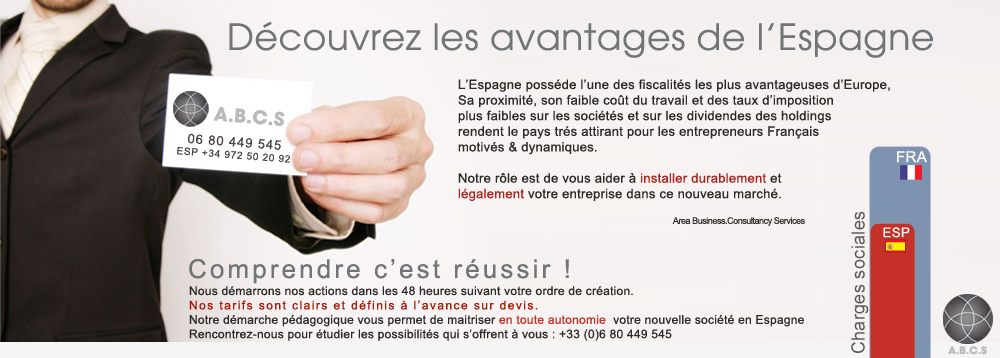
<style>
.page{position:relative;width:1000px;height:358px}
.page>*{position:absolute;margin:0}
.t1{font:36px "AvantGarde-Book";letter-spacing:0.02em;color:#717578}
.t2{font:13px "ArialMT";letter-spacing:0.02em;color:#2b2b26}
.t3{font:13px "ArialMT";letter-spacing:0.02em;color:#ae211b}
.t4{font:13px "ArialMT";letter-spacing:0.02em;color:#b12019}
.t5{font:18.6px "AvantGardeLT-Bold";letter-spacing:0.01em;color:#bababa}
.t6{font:10px "ArialMT";letter-spacing:0.07em;color:#494343}
.t7{font:13px "ArialMT";letter-spacing:0.07em;color:#494343}
.t8{font:15.1px "ArialMT";letter-spacing:0.02em;color:#fefefc}
.t9{font:9px "ArialMT";letter-spacing:-0.05em;color:#362e2b}
.t10{font:10px "ArialMT";letter-spacing:0.025em;color:#362e2b}
.t11{font:18px "ArialMT";letter-spacing:0.02em;color:#5a5957}
.t12{font:13.4px "ArialMT";letter-spacing:0.02em;color:#fcf9f4}
.t13{font:26px "ArialMT";letter-spacing:0.12em;color:#717578}
.t14{font:12px "ArialMT";letter-spacing:0.02em;color:#2b2b26}
.t15{font:12px "ArialMT";letter-spacing:0.12em;color:#a41a07}
.t16{font:12px "ArialMT";letter-spacing:0.02em;color:#c53029}
.t17{font:10.2px "AvantGardeLT-Bold";letter-spacing:0.01em;color:#bababa}
</style>
<div class="page">
<p class="t1" style="left:229px;top:21px;width:704px;height:37px">Découvrez les avantages de l’Espagne</p>
<p class="t2" style="left:458px;top:79px;width:432px;height:122px">L’Espagne posséde l’une des fiscalités les plus avantageuses d’Europe,<br>Sa proximité, son faible coût du travail et des taux d’imposition <br>plus faibles sur les sociétés et sur les dividendes des holdings  <br>rendent le pays trés attirant pour les entrepreneurs Français<br>motivés &amp; dynamiques.<br><br>Notre rôle est de vous aider à <span class="t3">installer durablement </span>et<br><span class="t4">légalement </span>votre entreprise dans ce nouveau marché.</p>
<p class="t5" style="left:213px;top:107px;width:72px;height:19px;rotate:5deg">A.B.C.S</p>
<p class="t6" style="left:177px;top:133px;width:113px;height:30px;text-align:center;rotate:4deg"><span class="t7">06 80 449 545<br></span>ESP +34 972 50 20 92</p>
<p class="t8" style="left:897px;top:151px;width:30px;height:12px">FRA</p>
<p class="t9" style="left:672px;top:217px;width:133px;height:9px"><span class="t10"><br></span>Area Business.Consultancy Services</p>
<p class="t11" style="left:851px;top:211px;width:18px;height:142px;rotate:-90deg">Charges sociales</p>
<p class="t12" style="left:883px;top:227px;width:27px;height:11px">ESP</p>
<p class="t13" style="left:189px;top:259px;width:380px;height:25px">Comprendre c’est réussir !</p>
<p class="t14" style="left:189px;top:286px;width:615px;height:55px">Nous démarrons nos actions dans les 48 heures suivant votre ordre de création.<br><span class="t15">Nos tarifs sont clairs et définis à l’avance sur devis.<br></span>Notre démarche pédagogique vous permet de maitriser <span class="t16">en toute autonomie</span>  votre nouvelle société en Espagne<br>Rencontrez-nous pour étudier les possibilités qui s’offrent à vous : +33 (0)6 80 449 545</p>
<p class="t17" style="left:948px;top:346px;width:39px;height:9px">A.B.C.S</p>
</div>
